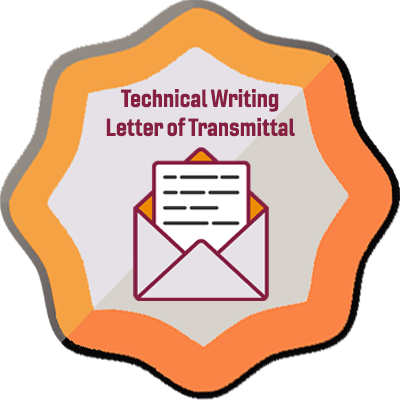
<style>
.page{position:relative;width:400px;height:400px;background:#ffffff}
.page>*{position:absolute;margin:0}
.t1{font:24px "Gineso-ConBol";color:#861f41}
</style>
<div class="page">
<p class="t1" style="left:106px;top:89px;width:189px;height:48px;text-align:center">Technical Writing<br>Letter of Transmittal</p>
</div>
